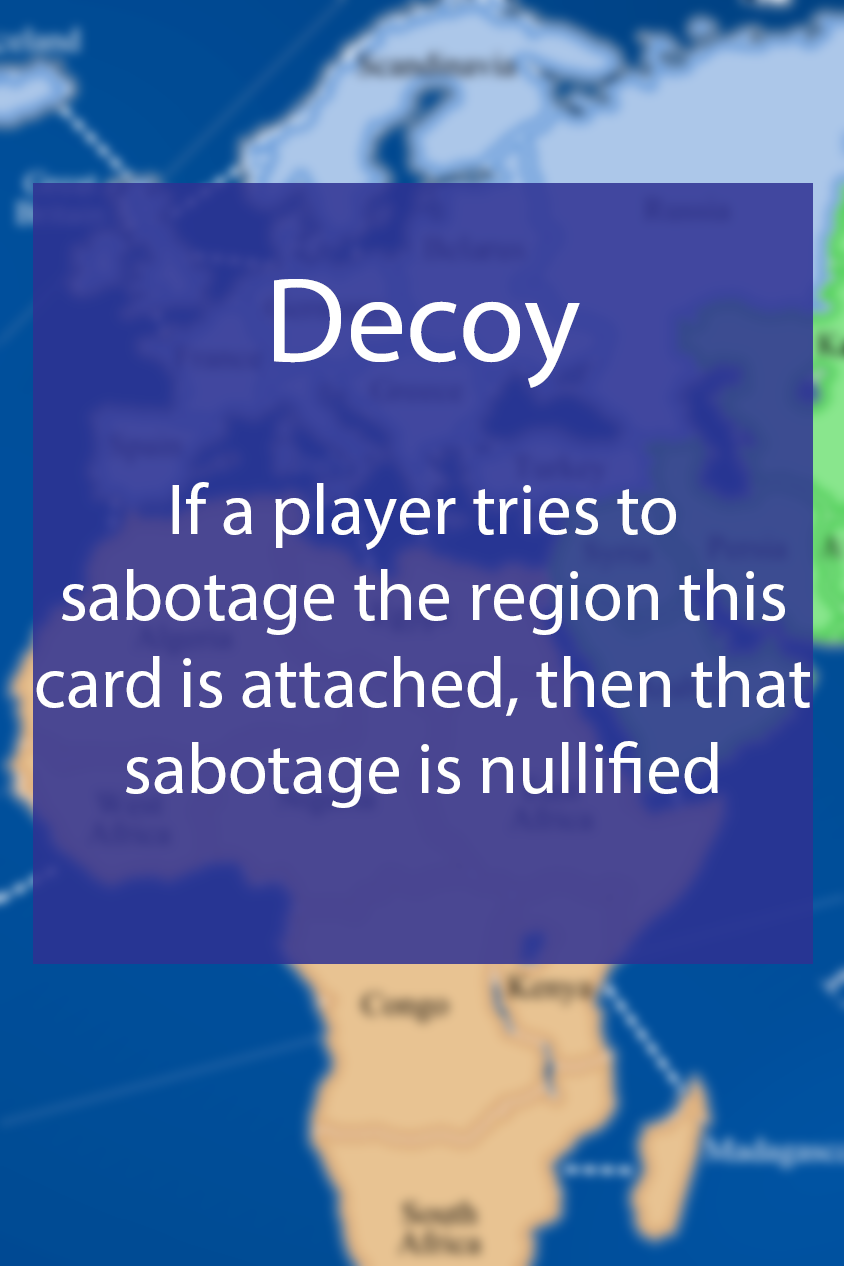
<style>
.page{position:relative;width:844px;height:1266px}
.page>*{position:absolute;margin:0}
.t1{font:72px "MyriadPro-Regular";color:#ffffff}
.t2{font:48px "MyriadPro-Regular";color:#ffffff}
.t3{font:120px "MyriadPro-Regular";color:#ffffff}
</style>
<div class="page">
<p class="t1" style="left:36px;top:279px;width:774px;height:529px;text-align:center"><span class="t2"><br></span><span class="t3">Decoy<br><br><br><br></span>If a player tries to sabotage the region this card is attached, then that sabotage is nullified</p>
</div>
